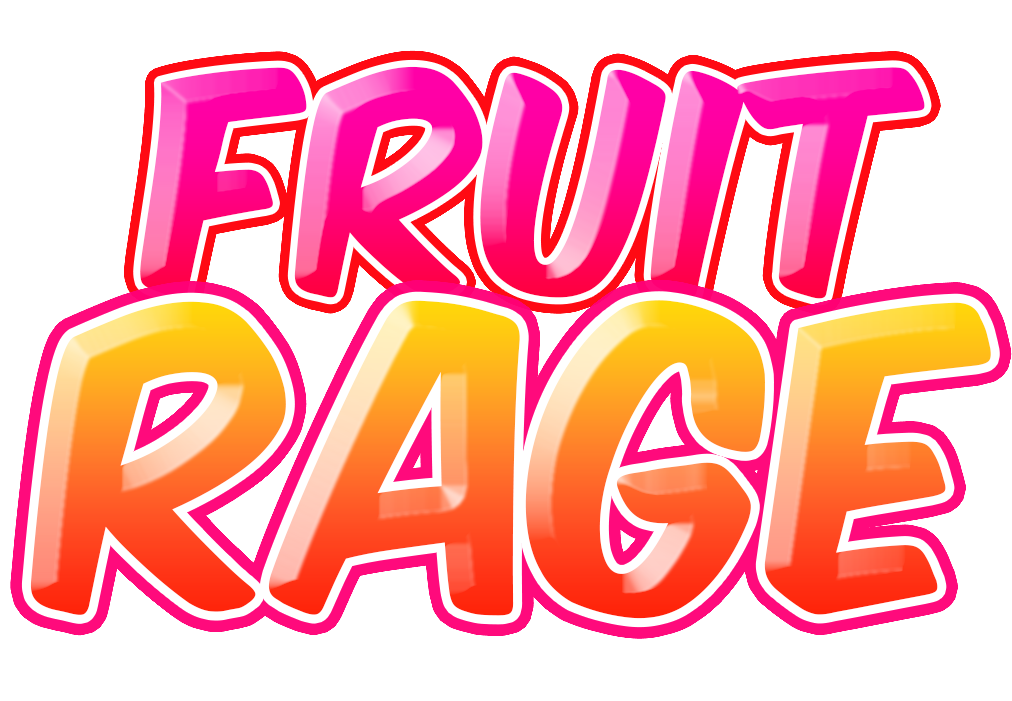
<style>
.page{position:relative;width:1012px;height:701px;background:#ffffff}
.page>*{position:absolute;margin:0}
.t1{font:259.3px "KomikaTitle-Axis"}
.t2{font:352px "KomikaTitle-Axis"}
</style>
<div class="page">
<p class="t1" style="left:140px;top:66px;width:785px;height:233px">Fruit</p>
<p class="t2" style="left:30px;top:300px;width:961px;height:319px">RAGE</p>
</div>
